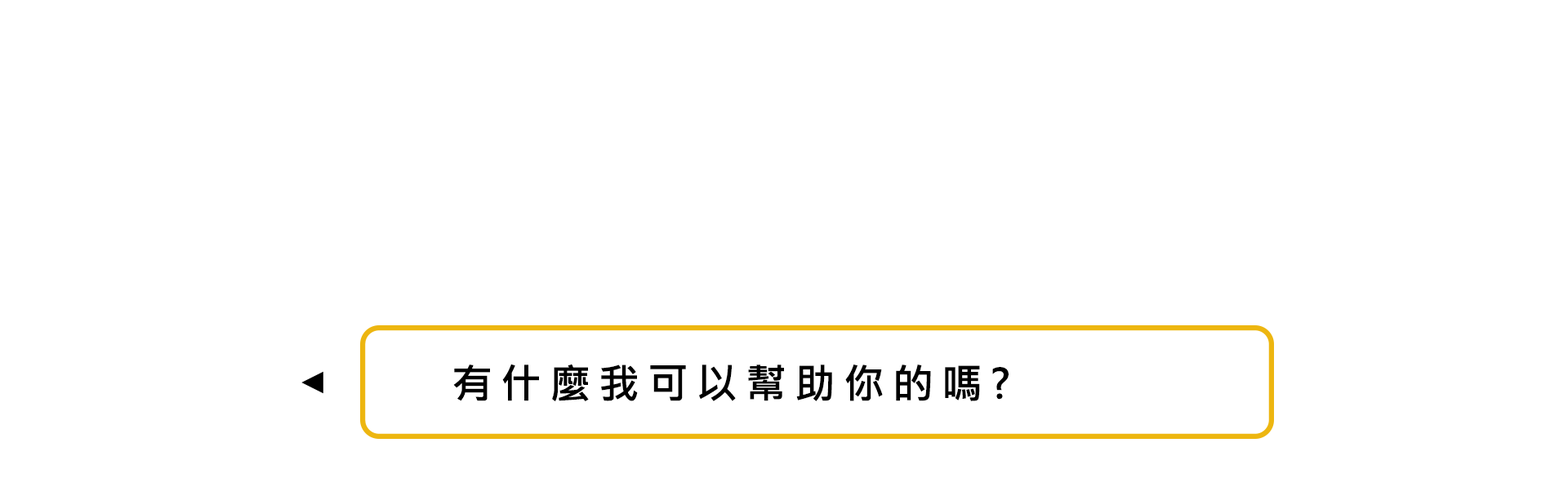
<style>
.page{position:relative;width:1568px;height:492px;background:#ffffff}
.page>*{position:absolute;margin:0}
.t1{font:40.8px "MicrosoftJhengHeiBold";letter-spacing:0.2em;color:#000000}
</style>
<div class="page">
<p class="t1" style="left:453px;top:363px;width:556px;height:38px">有什麼我可以幫助你的嗎?</p>
</div>
